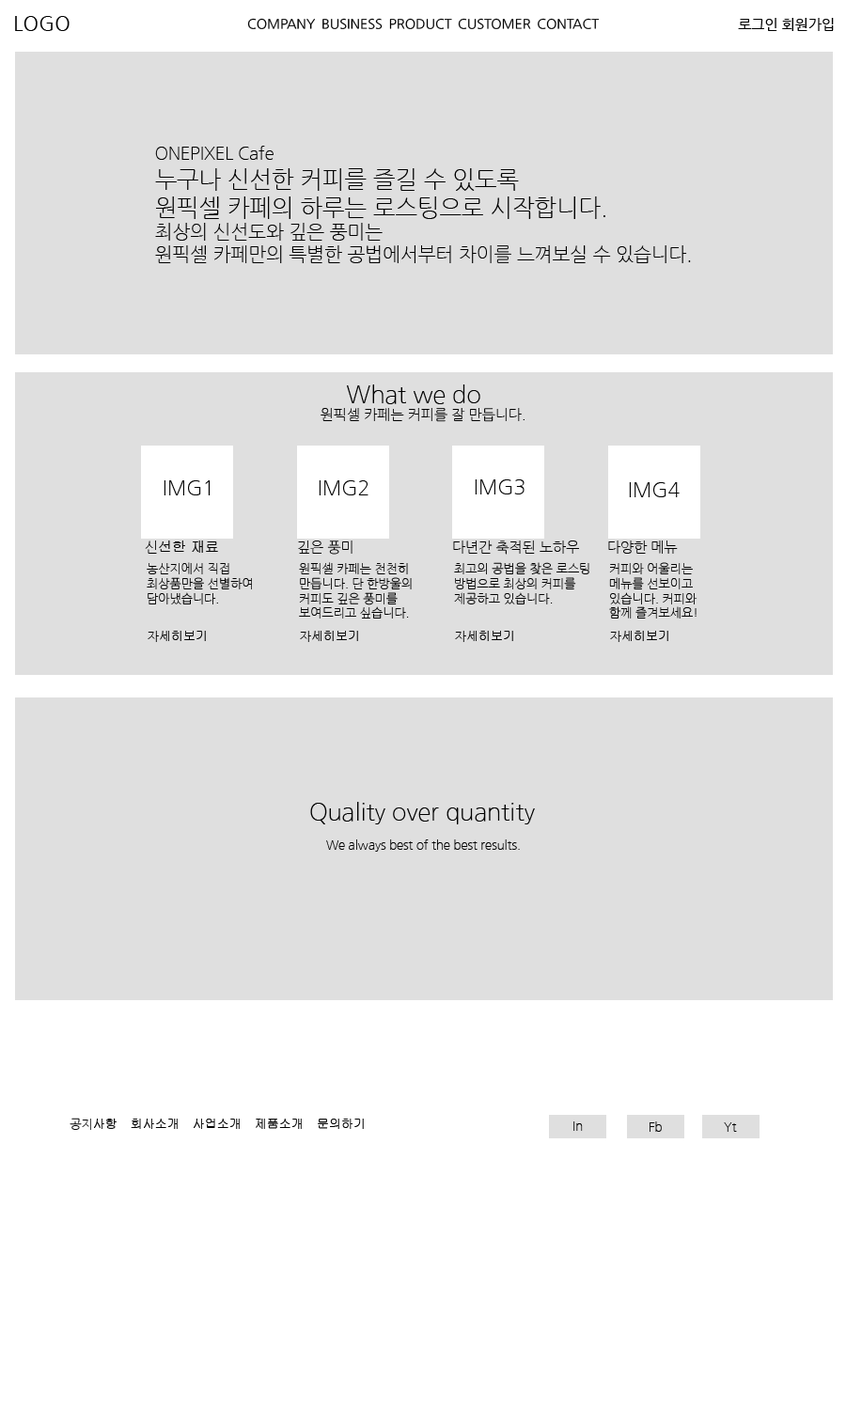
<style>
.page{position:relative;width:846px;height:1410px;background:#dfdfdf}
.page>*{position:absolute;margin:0}
.t1{font:20px "NanumGothic";color:#000000}
.t2{font:13.2px "NanumGothic";color:#000000}
.t3{font:14.1px "NanumGothic";color:#000000}
.t4{font:18.8px "NanumGothicLight";color:#000000}
.t5{font:16.9px "NanumGothicLight";color:#000000}
.t6{font:23.5px "NanumGothicLight";color:#000000}
.t7{font:14.1px "NanumGothicLight";color:#000000}
.t8{font:20px "NanumGothicLight";color:#000000}
.t9{font:14.1px "Gulim";color:#000000}
.t10{font:12.2px "NanumGothicLight";color:#000000}
.t11{font:12.2px "Gulim";color:#000000}
</style>
<div class="page">
<p class="t1" style="left:15px;top:16px;width:55px;height:15px">LOGO</p>
<p class="t2" style="left:247px;top:18px;width:353px;height:11px">COMPANY BUSINESS PRODUCT CUSTOMER CONTACT</p>
<p class="t3" style="left:738px;top:18px;width:96px;height:13px">로그인 회원가입</p>
<p class="t4" style="left:155px;top:146px;width:536px;height:117px;text-align:justify"><span class="t5">ONEPIXEL Cafe<br></span><span class="t6">누구나 신선한 커피를 즐길 수 있도록<br>원픽셀 카페의 하루는 로스팅으로 시작합니다.<br></span>최상의 신선도와 깊은 풍미는<br>원픽셀 카페만의 특별한 공법에서부터 차이를 느껴보실 수 있습니다.</p>
<p class="t7" style="left:320px;top:384px;width:204px;height:38px;text-align:justify"><span class="t6">    What we do<br></span>원픽셀 카페는 커피를 잘 만듭니다.</p>
<p class="t8" style="left:164px;top:480px;width:47px;height:15px">IMG1</p>
<p class="t8" style="left:319px;top:480px;width:49px;height:15px">IMG2</p>
<p class="t8" style="left:475px;top:479px;width:49px;height:15px">IMG3</p>
<p class="t8" style="left:629px;top:482px;width:50px;height:15px">IMG4</p>
<p class="t9" style="left:145px;top:540px;width:73px;height:14px"><span class="t7">신</span>선한 재료</p>
<p class="t7" style="left:298px;top:540px;width:54px;height:15px">깊은 풍미</p>
<p class="t7" style="left:453px;top:540px;width:126px;height:15px">다년간 축적된 노하우</p>
<p class="t7" style="left:608px;top:540px;width:70px;height:14px">다양한 메뉴</p>
<p class="t10" style="left:147px;top:562px;width:105px;height:42px;text-align:justify">농산지에서 직접 <br>최상품만을 선별하여 <br>담아냈습니다.</p>
<p class="t10" style="left:299px;top:562px;width:113px;height:56px;text-align:justify">원픽셀 카페는 천천히 <br>만듭니다. 단 한방울의 <br>커피도 깊은 풍미를 <br>보여드리고 싶습니다.</p>
<p class="t10" style="left:454px;top:562px;width:135px;height:42px;text-align:justify">최고의 공법을 찾은 로스팅 <br>방법으로 최상의 커피를 <br>제공하고 있습니다.</p>
<p class="t10" style="left:609px;top:562px;width:88px;height:56px;text-align:justify">커피와 어울리는 <br>메뉴를 선보이고 <br>있습니다. 커피와 <br>함께 즐겨보세요!</p>
<p class="t11" style="left:148px;top:631px;width:58px;height:11px"><span class="t10">자</span>세히보기</p>
<p class="t11" style="left:300px;top:631px;width:58px;height:11px"><span class="t10">자</span>세히보기</p>
<p class="t11" style="left:455px;top:631px;width:58px;height:11px"><span class="t10">자</span>세히보기</p>
<p class="t11" style="left:610px;top:631px;width:58px;height:11px"><span class="t10">자</span>세히보기</p>
<p class="t10" style="left:310px;top:802px;width:225px;height:49px;text-align:justify"><span class="t6">Quality over quantity<br></span>       <br>        We always best of the best results.</p>
<p class="t11" style="left:70px;top:1117px;width:294px;height:13px"><span class="t10">공지</span>사항 회사소개 사업소개 제품소개 문의하기</p>
<p class="t10" style="left:573px;top:1121px;width:10px;height:10px">In</p>
<p class="t10" style="left:649px;top:1121px;width:13px;height:11px">Fb</p>
<p class="t10" style="left:724px;top:1122px;width:13px;height:10px">Yt</p>
</div>
